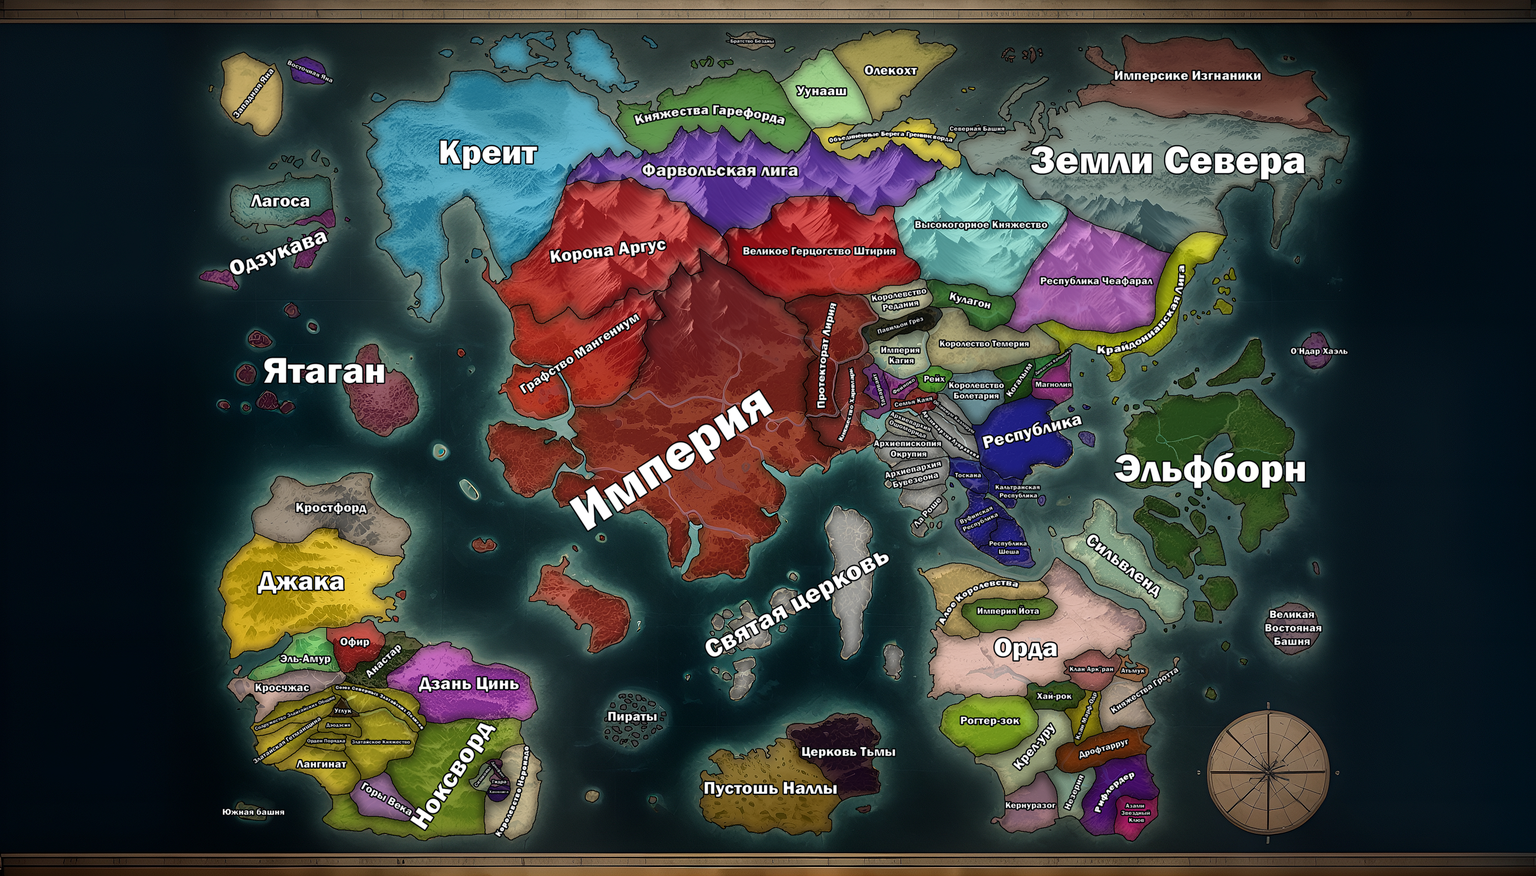
<style>
.page{position:relative;width:1536px;height:876px}
.page>*{position:absolute;margin:0}
.t1{font:5.2px "FranklinGothic-Heavy"}
.t2{font:6.7px "FranklinGothic-Heavy"}
.t3{font:13.5px "FranklinGothic-Heavy"}
.t4{font:9px "FranklinGothic-Heavy"}
.t5{font:13.5px "FranklinGothic-Heavy";color:#e3e3e3}
.t6{font:34.5px "FranklinGothic-Heavy";color:#ffffff}
.t7{font:40.1px "FranklinGothic-Heavy";color:#ffffff}
.t8{font:18px "FranklinGothic-Heavy";color:#f2f2f2}
.t9{font:18px "FranklinGothic-Heavy";color:#ffffff}
.t10{font:10.5px "FranklinGothic-Heavy"}
.t11{font:22.5px "FranklinGothic-Heavy";color:#ffffff}
.t12{font:11.2px "FranklinGothic-Heavy"}
.t13{font:4.5px "FranklinGothic-Heavy"}
.t14{font:37.5px "FranklinGothic-Heavy";color:#ffffff}
.t15{font:6.8px "FranklinGothic-Heavy"}
.t16{font:51.7px "FranklinGothic-Heavy";color:#ffffff}
.t17{font:6px "FranklinGothic-Heavy"}
.t18{font:7.9px "FranklinGothic-Heavy"}
.t19{font:27px "FranklinGothic-Heavy";color:#ffffff}
.t20{font:8.2px "FranklinGothic-Heavy"}
.t21{font:4.1px "FranklinGothic-Heavy"}
.t22{font:5.3px "FranklinGothic-Heavy"}
</style>
<div class="page">
<p class="t1" style="left:730px;top:39px;width:44px;height:5px">Братство Бездны</p>
<p class="t2" style="left:287px;top:60px;width:46px;height:23px;rotate:22deg">Восточная Яна</p>
<p class="t3" style="left:865px;top:65px;width:52px;height:10px">Олекохт</p>
<p class="t4" style="left:233px;top:69px;width:41px;height:49px;rotate:-52deg">Западная Яна</p>
<p class="t3" style="left:1115px;top:71px;width:146px;height:11px">Имперсике Изгнаники</p>
<p class="t3" style="left:796px;top:86px;width:50px;height:11px">Уунааш</p>
<p class="t5" style="left:634px;top:105px;width:151px;height:20px">Княжества Гарефорда</p>
<p class="t2" style="left:949px;top:126px;width:56px;height:6px">Северная Башня</p>
<p class="t2" style="left:829px;top:131px;width:123px;height:11px">Объединённые Берега Гренинсворда</p>
<p class="t6" style="left:440px;top:140px;width:97px;height:29px">Креит</p>
<p class="t7" style="left:1031px;top:146px;width:274px;height:34px">Земли Севера</p>
<p class="t8" style="left:642px;top:163px;width:156px;height:16px">Фарвольская лига</p>
<p class="t9" style="left:250px;top:195px;width:60px;height:12px">Лагоса</p>
<p class="t10" style="left:915px;top:221px;width:132px;height:9px">Высокогорное Княжество</p>
<p class="t11" style="left:230px;top:232px;width:98px;height:43px;rotate:-21deg">Одзукава</p>
<p class="t9" style="left:550px;top:241px;width:116px;height:22px;rotate:-7deg">Корона Аргус</p>
<p class="t12" style="left:743px;top:247px;width:152px;height:9px">Великое Герцогство Штирия</p>
<p class="t10" style="left:1097px;top:265px;width:88px;height:90px;rotate:-45deg">Крайдонианская Лига</p>
<p class="t10" style="left:1041px;top:277px;width:112px;height:9px">Республика Чеафарал</p>
<p class="t4" style="left:871px;top:289px;width:56px;height:22px;text-align:center;rotate:-9deg">Королевство <br>Редания</p>
<p class="t12" style="left:949px;top:292px;width:42px;height:17px;rotate:13deg">Кулагон</p>
<p class="t12" style="left:817px;top:303px;width:20px;height:105px;rotate:-84deg">Протекторат Лирия</p>
<p class="t3" style="left:519px;top:313px;width:121px;height:81px;rotate:-33deg">Графство Мангениум</p>
<p class="t2" style="left:877px;top:317px;width:47px;height:17px;rotate:-17deg">Павильон Грёз</p>
<p class="t4" style="left:940px;top:340px;width:89px;height:8px">Королество Темерия</p>
<p class="t4" style="left:881px;top:347px;width:38px;height:17px;text-align:center">Империя<br> Кагия</p>
<p class="t13" style="left:1035px;top:349px;width:37px;height:27px;rotate:-34deg">Династия Креццака</p>
<p class="t4" style="left:1291px;top:348px;width:57px;height:7px">О'Ндар Хаэль</p>
<p class="t14" style="left:264px;top:358px;width:120px;height:25px">Ятаган</p>
<p class="t4" style="left:1006px;top:363px;width:27px;height:34px;rotate:-55deg">Когалым</p>
<p class="t15" style="left:838px;top:367px;width:18px;height:74px;rotate:-82deg">Княжество Харнмарк</p>
<p class="t15" style="left:872px;top:374px;width:14px;height:32px;rotate:-107deg">Таварвайт</p>
<p class="t4" style="left:924px;top:375px;width:21px;height:7px">Рейх</p>
<p class="t16" style="left:569px;top:390px;width:204px;height:141px;rotate:-33deg">Империя</p>
<p class="t17" style="left:892px;top:378px;width:23px;height:16px;rotate:-33deg">Фейноко</p>
<p class="t4" style="left:949px;top:382px;width:55px;height:18px;text-align:center">Королевство <br>Болетария</p>
<p class="t18" style="left:1036px;top:382px;width:36px;height:5px">Магнолия</p>
<p class="t2" style="left:894px;top:397px;width:39px;height:10px;rotate:-10deg">Семья Каяя</p>
<p class="t2" style="left:889px;top:412px;width:42px;height:26px;text-align:center;rotate:22deg">Архиепархия<br> Ошоморида</p>
<p class="t9" style="left:982px;top:416px;width:100px;height:33px;rotate:-14deg">Республика</p>
<p class="t4" style="left:874px;top:440px;width:67px;height:18px;text-align:center">Архиепископия <br>Окрупия</p>
<p class="t4" style="left:885px;top:461px;width:56px;height:27px;text-align:center;rotate:-13deg">Архиепархия<br> Бувезеона</p>
<p class="t7" style="left:1114px;top:453px;width:191px;height:35px">Эльфборн</p>
<p class="t2" style="left:955px;top:473px;width:26px;height:5px">Тоскана</p>
<p class="t2" style="left:995px;top:485px;width:45px;height:14px;text-align:center">Кальтранская <br>Республика</p>
<p class="t4" style="left:914px;top:498px;width:27px;height:30px;rotate:-48deg">Ла Роше</p>
<p class="t3" style="left:296px;top:503px;width:71px;height:11px">Кростфорд</p>
<p class="t2" style="left:959px;top:506px;width:40px;height:26px;text-align:center;rotate:-25deg">Вуфинская <br>Республика</p>
<p class="t2" style="left:989px;top:541px;width:38px;height:13px;text-align:center">Республика<br> Шеша</p>
<p class="t9" style="left:1087px;top:534px;width:73px;height:64px;rotate:37deg">Сильвленд</p>
<p class="t19" style="left:705px;top:552px;width:184px;height:105px;rotate:-29deg">Святая церковь</p>
<p class="t19" style="left:258px;top:572px;width:86px;height:22px">Джака</p>
<p class="t4" style="left:939px;top:580px;width:79px;height:45px;rotate:-25deg">Алое Королевства</p>
<p class="t4" style="left:978px;top:606px;width:61px;height:9px">Империя Йота</p>
<p class="t12" style="left:1265px;top:610px;width:56px;height:35px;text-align:center">Великая<br> Востояная<br> Башня</p>
<p class="t12" style="left:340px;top:637px;width:29px;height:10px">Офир</p>
<p class="t19" style="left:994px;top:638px;width:63px;height:23px">Орда</p>
<p class="t12" style="left:366px;top:645px;width:35px;height:33px;rotate:-43deg">Анастар</p>
<p class="t12" style="left:280px;top:654px;width:51px;height:10px">Эль-Амур</p>
<p class="t9" style="left:419px;top:677px;width:100px;height:15px">Дзань Цинь</p>
<p class="t2" style="left:1070px;top:667px;width:43px;height:5px">Клан Арк"ран</p>
<p class="t4" style="left:1110px;top:668px;width:69px;height:46px;rotate:-33deg">Княжества Гротта</p>
<p class="t2" style="left:1121px;top:668px;width:24px;height:6px">Атьмук</p>
<p class="t12" style="left:255px;top:684px;width:54px;height:9px">Кросчжас</p>
<p class="t1" style="left:336px;top:685px;width:87px;height:45px;rotate:25deg">Союз Северных Златайских Полисов</p>
<p class="t1" style="left:255px;top:696px;width:80px;height:34px;rotate:-22deg">Содружество Злайтайских Общин</p>
<p class="t4" style="left:1036px;top:692px;width:36px;height:8px">Хай-рок</p>
<p class="t2" style="left:1075px;top:692px;width:22px;height:47px;rotate:-69deg">Клан Марф-Одр</p>
<p class="t2" style="left:334px;top:708px;width:18px;height:6px">Углук</p>
<p class="t3" style="left:608px;top:712px;width:49px;height:11px">Пираты</p>
<p class="t2" style="left:253px;top:717px;width:68px;height:46px;rotate:-34deg">Златайская Гетманщина</p>
<p class="t1" style="left:326px;top:723px;width:24px;height:4px">Дэодэсия</p>
<p class="t19" style="left:410px;top:723px;width:86px;height:107px;rotate:-56deg">Ноксворд</p>
<p class="t12" style="left:961px;top:717px;width:59px;height:9px">Рогтер-зок</p>
<p class="t3" style="left:1013px;top:723px;width:42px;height:47px;rotate:-50deg">Крел-уру</p>
<p class="t1" style="left:307px;top:739px;width:38px;height:5px">Орден Порядка</p>
<p class="t1" style="left:352px;top:739px;width:58px;height:5px">Златайское Княжество</p>
<p class="t20" style="left:495px;top:746px;width:34px;height:91px;rotate:-72deg">Королевство Норонадо</p>
<p class="t3" style="left:802px;top:747px;width:93px;height:11px">Церковь Тьмы</p>
<p class="t4" style="left:1079px;top:739px;width:49px;height:20px;rotate:-16deg">Дрофтарруг</p>
<p class="t12" style="left:296px;top:760px;width:50px;height:8px">Лангинат</p>
<p class="t21" style="left:490px;top:762px;width:15px;height:16px;rotate:52deg">Дресфент</p>
<p class="t22" style="left:474px;top:766px;width:17px;height:20px;rotate:-53deg">Симионы</p>
<p class="t4" style="left:1094px;top:772px;width:40px;height:41px;rotate:-46deg">Рифлердер</p>
<p class="t12" style="left:361px;top:782px;width:51px;height:34px;rotate:29deg">Горы Века</p>
<p class="t1" style="left:492px;top:780px;width:15px;height:4px">Гидра</p>
<p class="t9" style="left:704px;top:782px;width:133px;height:15px">Пустошь Наллы</p>
<p class="t4" style="left:1064px;top:775px;width:20px;height:35px;rotate:-67deg">Незерия</p>
<p class="t21" style="left:489px;top:790px;width:19px;height:3px">Хамелига</p>
<p class="t4" style="left:223px;top:808px;width:61px;height:7px">Южная башня</p>
<p class="t4" style="left:1006px;top:802px;width:50px;height:8px">Кернуразог</p>
<p class="t17" style="left:1121px;top:804px;width:29px;height:18px;text-align:center">Азами <br>Звездный<br> Клюв</p>
</div>
